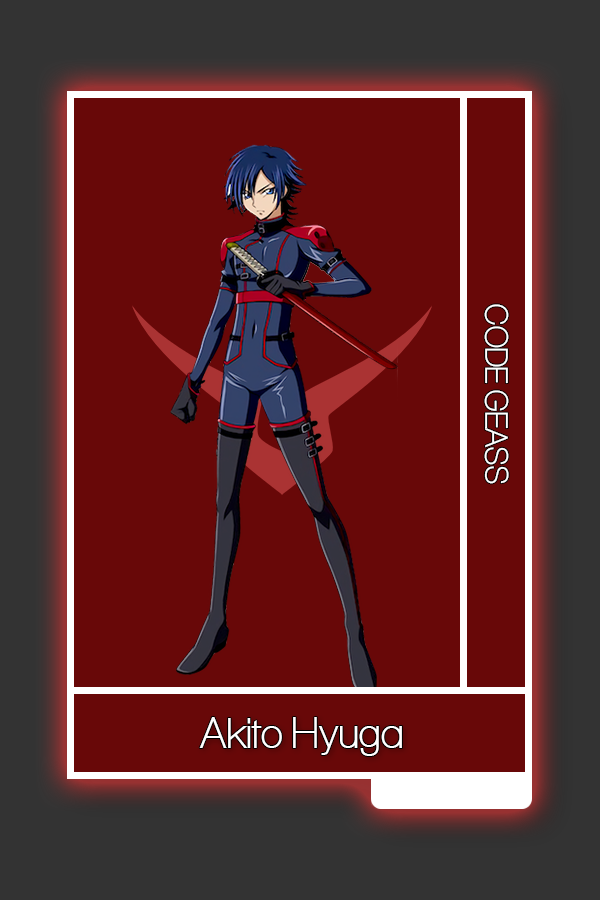
<style>
.page{position:relative;width:600px;height:900px;background:#680808}
.page>*{position:absolute;margin:0}
.t1{font:31.2px "Aliquam";color:#ffffff}
.t2{font:43.2px "Aliquam";color:#ffffff}
</style>
<div class="page">
<p class="t1" style="left:484px;top:304px;width:25px;height:180px;rotate:90deg">CODE GEASS</p>
<p class="t2" style="left:199px;top:717px;width:203px;height:39px">Akito Hyuga</p>
</div>
